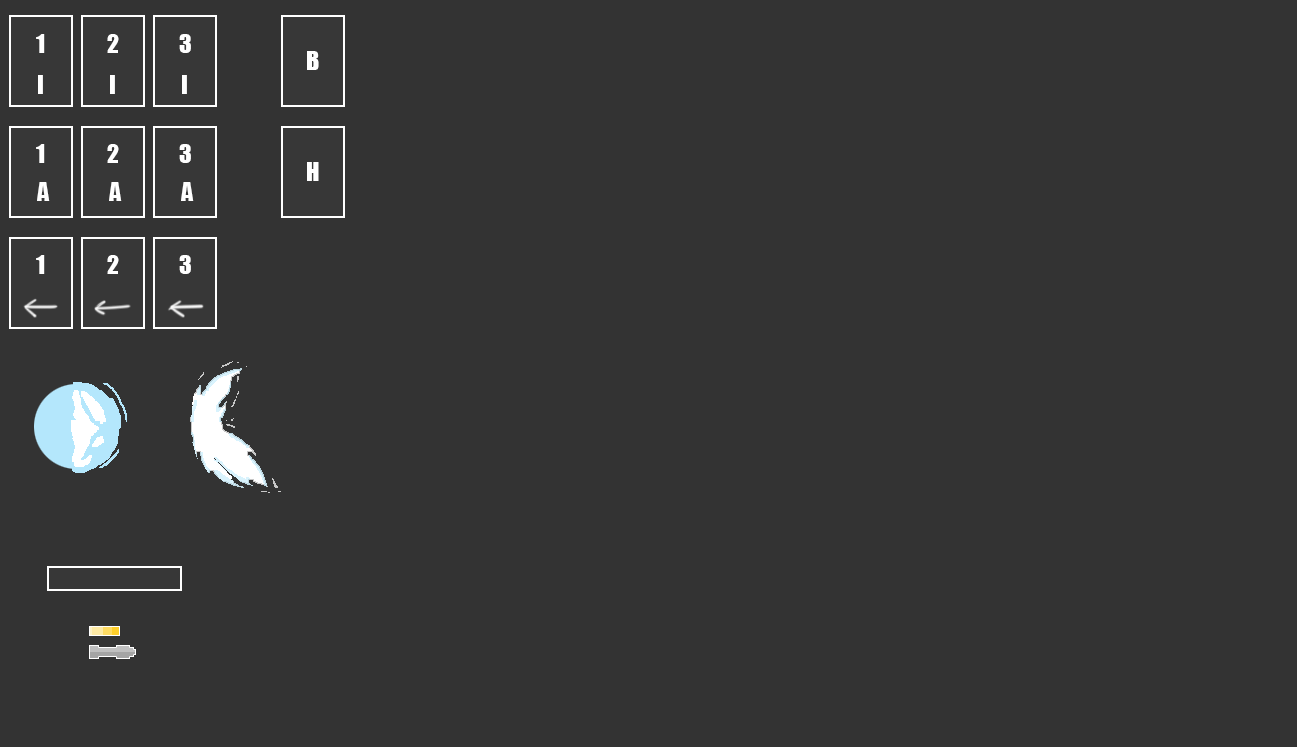
<style>
.page{position:relative;width:1297px;height:747px;background:#333333}
.page>*{position:absolute;margin:0}
.t1{font:24px "Impact";color:#ffffff}
</style>
<div class="page">
<p class="t1" style="left:36px;top:34px;width:9px;height:19px">1</p>
<p class="t1" style="left:107px;top:34px;width:12px;height:19px">2</p>
<p class="t1" style="left:179px;top:34px;width:12px;height:19px">3</p>
<p class="t1" style="left:307px;top:51px;width:12px;height:19px">B</p>
<p class="t1" style="left:38px;top:75px;width:5px;height:19px">I</p>
<p class="t1" style="left:110px;top:75px;width:5px;height:19px">I</p>
<p class="t1" style="left:182px;top:75px;width:5px;height:19px">I</p>
<p class="t1" style="left:36px;top:144px;width:9px;height:19px">1</p>
<p class="t1" style="left:107px;top:144px;width:12px;height:19px">2</p>
<p class="t1" style="left:179px;top:144px;width:12px;height:19px">3</p>
<p class="t1" style="left:307px;top:162px;width:12px;height:19px">H</p>
<p class="t1" style="left:37px;top:182px;width:13px;height:19px">A</p>
<p class="t1" style="left:109px;top:182px;width:13px;height:19px">A</p>
<p class="t1" style="left:181px;top:182px;width:13px;height:19px">A</p>
<p class="t1" style="left:36px;top:255px;width:9px;height:19px">1</p>
<p class="t1" style="left:107px;top:255px;width:12px;height:19px">2</p>
<p class="t1" style="left:179px;top:255px;width:12px;height:19px">3</p>
</div>
